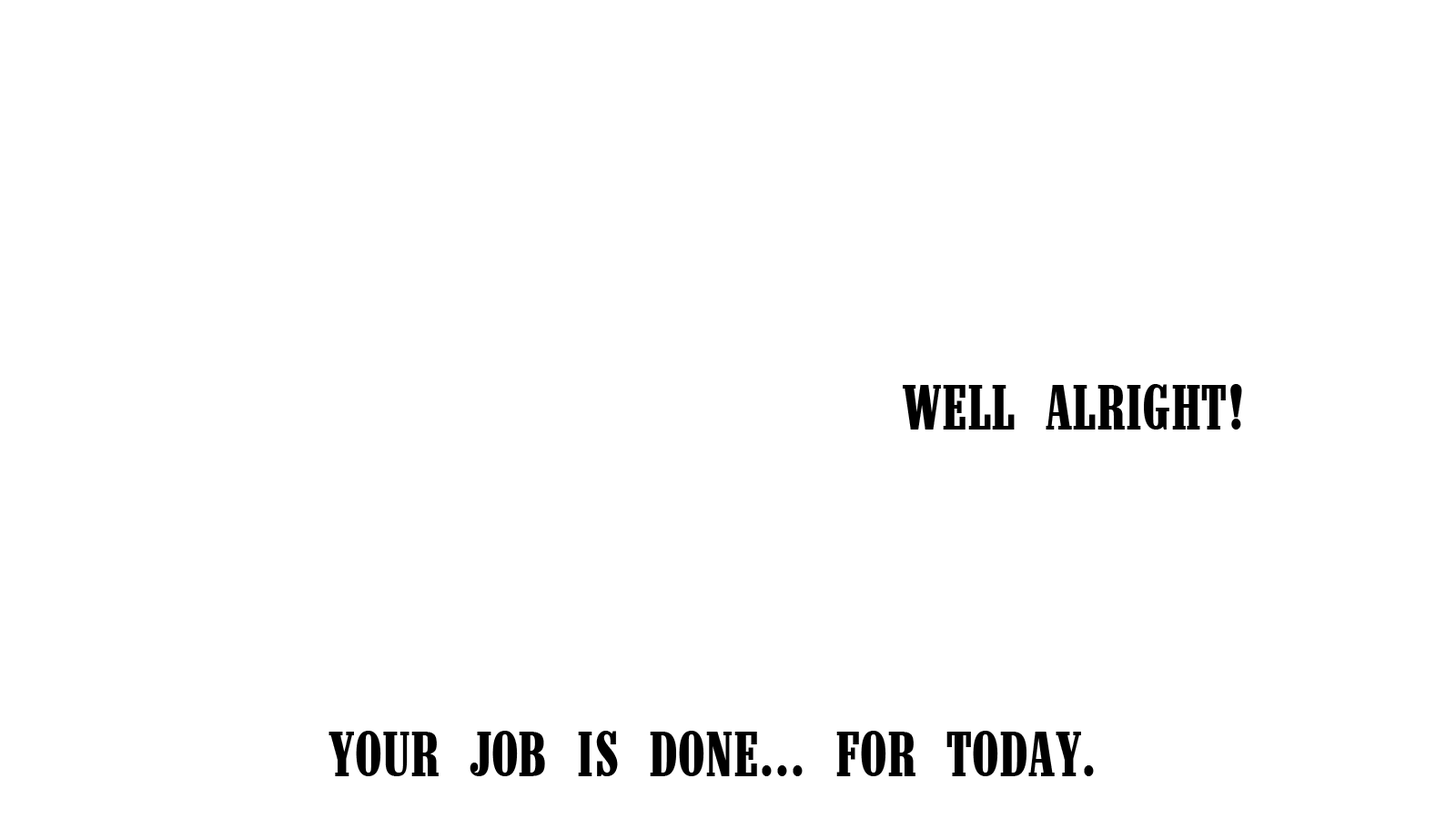
<style>
.page{position:relative;width:1456px;height:819px;background:#ffffff}
.page>*{position:absolute;margin:0}
.t1{font:65.5px "Marlboro";color:#000000}
</style>
<div class="page">
<p class="t1" style="left:903px;top:384px;width:339px;height:46px">WELL ALRIGHT!</p>
<p class="t1" style="left:329px;top:731px;width:765px;height:45px">YOUR JOB IS DONE... FOR TODAY.</p>
</div>
